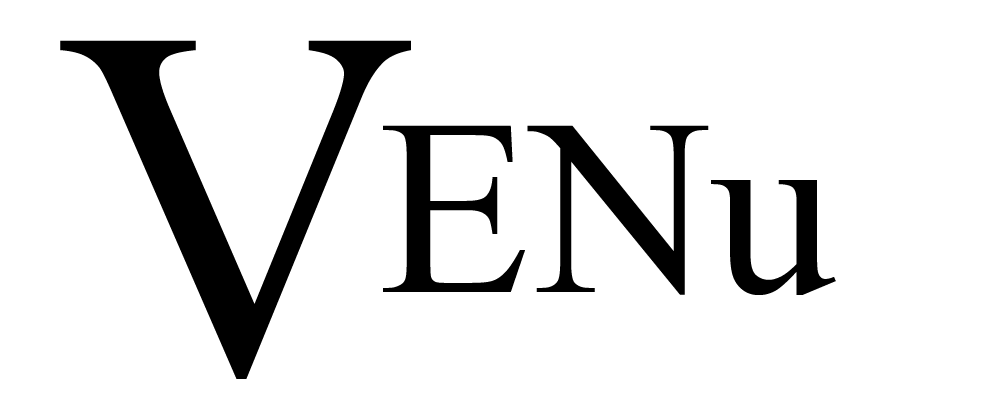
<style>
.page{position:relative;width:1000px;height:400px;background:#ffffff}
.page>*{position:absolute;margin:0}
.t1{font:500px "TimesNewRomanPSMT";color:#000000}
.t2{font:250px "TimesNewRomanPSMT";color:#000000}
</style>
<div class="page">
<p class="t1" style="left:60px;top:40px;width:351px;height:339px">V</p>
<p class="t2" style="left:383px;top:125px;width:453px;height:170px">ENu</p>
</div>
